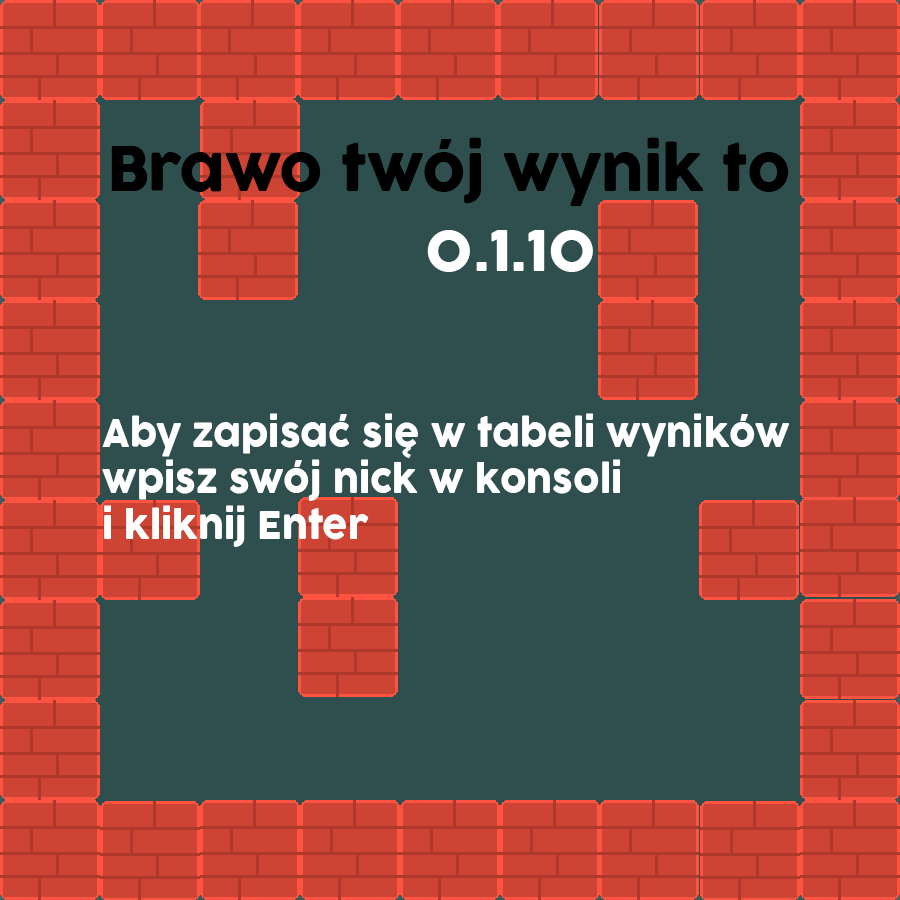
<style>
.page{position:relative;width:900px;height:900px;background:#2f4f4f}
.page>*{position:absolute;margin:0}
.t1{font:59.8px "COCOGOOSE";color:#000000}
.t2{font:54.8px "COCOGOOSE";color:#ffffff}
.t3{font:38.3px "COCOGOOSE";color:#ffffff;scale:0.94 1}
</style>
<div class="page">
<p class="t1" style="left:111px;top:137px;width:678px;height:69px">Brawo twój wynik to</p>
<p class="t2" style="left:427px;top:230px;width:166px;height:42px">0.1.10</p>
<p class="t3" style="left:102px;top:413px;width:687px;height:134px">Aby zapisać się w tabeli wyników <br>wpisz swój nick w konsoli <br>i kliknij Enter</p>
</div>
